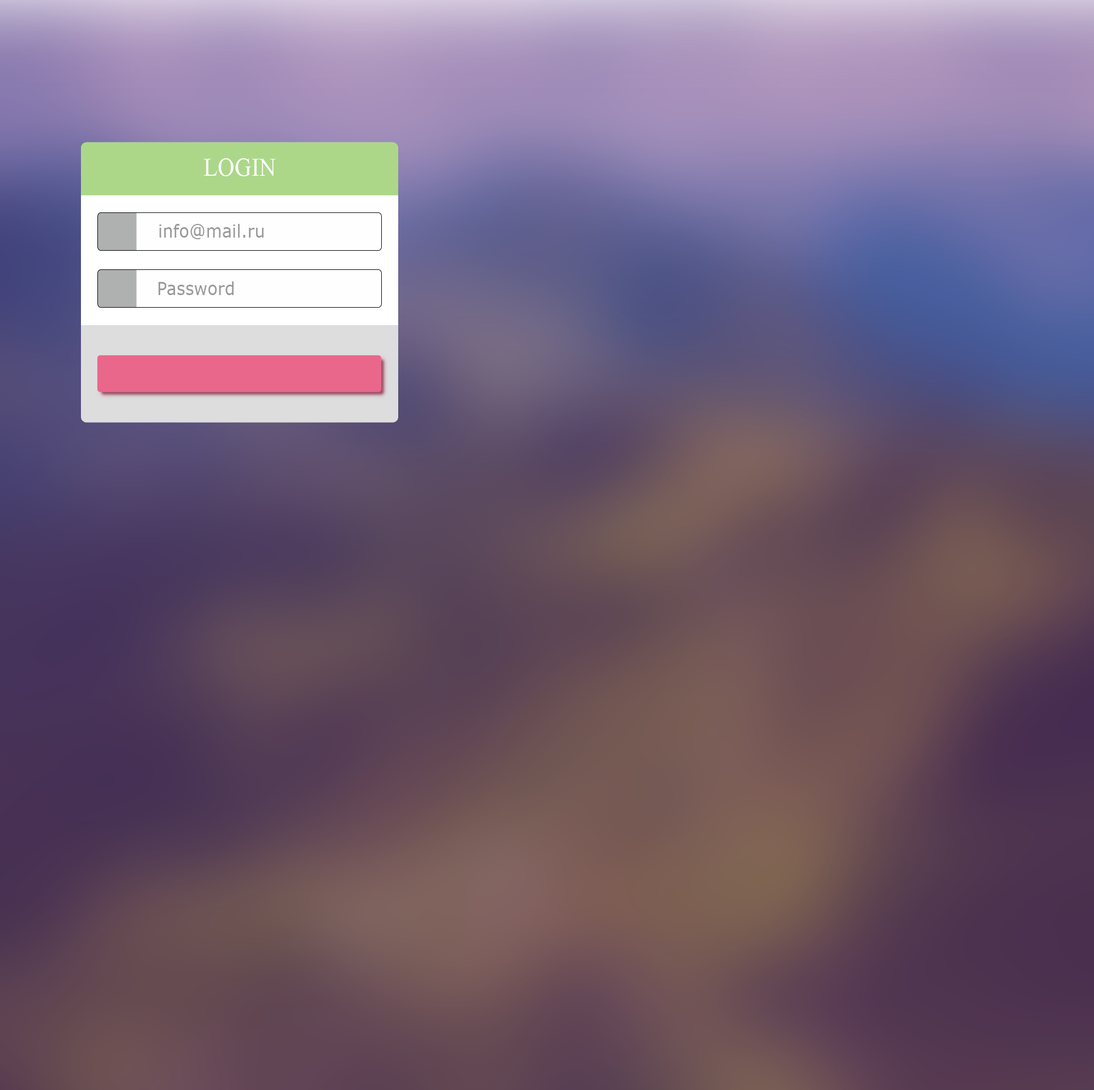
<style>
.page{position:relative;width:1094px;height:1090px}
.page>*{position:absolute;margin:0}
.t1{font:25.3px "TimesNewRomanPSMT";letter-spacing:0.01em;color:#fefffe;text-transform:uppercase;scale:0.91 1}
.t2{font:18.1px "Verdana";letter-spacing:0.01em;color:#999999;scale:0.91 1}
</style>
<div class="page">
<p class="t1" style="left:204px;top:158px;width:72px;height:18px">LOGIN</p>
<p class="t2" style="left:159px;top:224px;width:105px;height:15px">info@mail.ru</p>
<p class="t2" style="left:158px;top:281px;width:76px;height:14px">Password</p>
</div>
